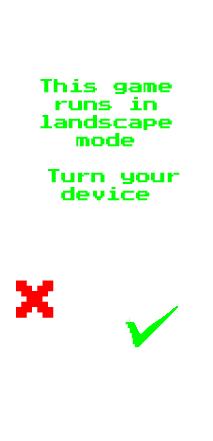
<style>
.page{position:relative;width:213px;height:441px;background:#ffffff}
.page>*{position:absolute;margin:0}
.t1{font:15px "PressStart2P";color:#00ff00}
.t2{font:42.6px "PressStart2P";color:#ff0000}
</style>
<div class="page">
<p class="t1" style="left:40px;top:79px;width:140px;height:122px;text-align:center">This game runs in landscape mode <br><br> Turn your   <br>device</p>
<p class="t2" style="left:16px;top:280px;width:38px;height:38px">X</p>
</div>
